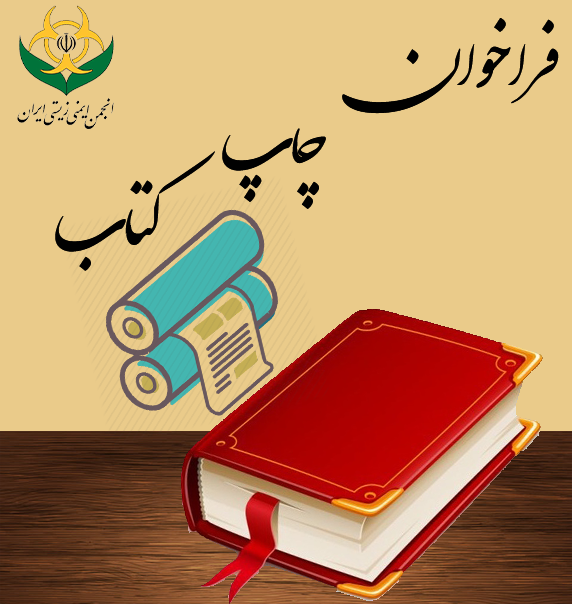
<style>
.page{position:relative;width:572px;height:604px;background:#eacb8a}
.page>*{position:absolute;margin:0}
.t1{font:72px "Shekasteh_Beta";color:#010101}
</style>
<div class="page">
<p class="t1" style="left:342px;top:18px;width:217px;height:96px">فراخوان</p>
<p class="t1" style="left:222px;top:128px;width:104px;height:81px">چاپ</p>
<p class="t1" style="left:55px;top:151px;width:160px;height:120px">کتاب</p>
</div>
